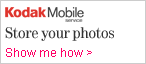
<style>
.page{position:relative;width:146px;height:64px;background:#ffffff}
.page>*{position:absolute;margin:0}
.t1{font:16px "Tele-Antiqua";color:#333333}
.t2{font:12px "ArialMT";color:#ff0066}
</style>
<div class="page">
<p class="t1" style="left:5px;top:27px;width:109px;height:14px">Store your photos</p>
<p class="t2" style="left:6px;top:48px;width:86px;height:9px">Show me how &gt;</p>
</div>
